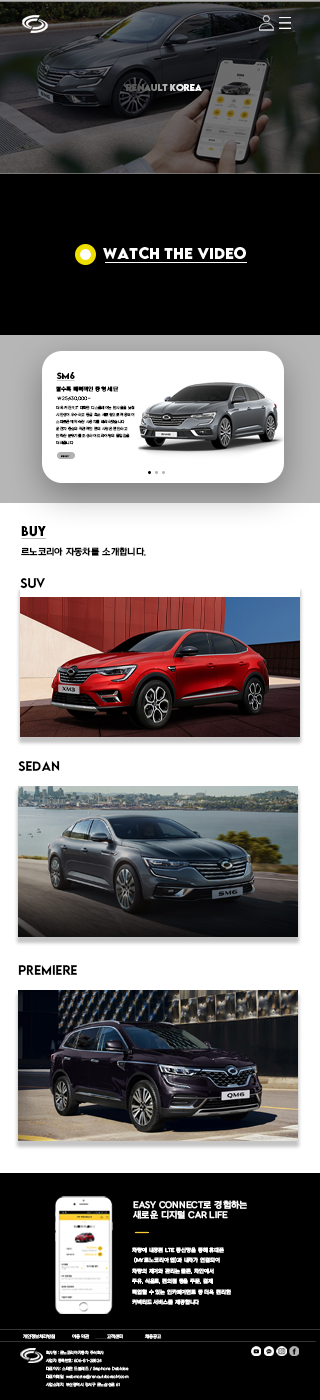
<style>
.page{position:relative;width:320px;height:1400px;background:#000000}
.page>*{position:absolute;margin:0}
.t1{font:8.2px "LEMONMILK-Bold"}
.t2{font:8.1px "LEMONMILK-Bold";color:#000000}
.t3{font:5.4px "NEXONLv1GothicOTFBold";color:#000000}
.t4{font:4.4px "NEXONLv1GothicOTFRegular";color:#000000}
.t5{font:4.4px "Gulim";color:#000000}
.t6{font:3.6px/6.9px "NEXONLv1GothicOTFLight";color:#000000}
.t7{font:2.6px "NEXONLv1GothicOTFLight";color:#000000}
.t8{font:11.9px "LEMONMILK-Bold";color:#000000}
.t9{font:8.9px "NEXONLv1GothicOTFBold";color:#000000}
.t10{font:12px "LEMONMILK-Medium";color:#000000}
.t11{font:8.7px/10.5px "NEXONLv1GothicOTFBold";color:#ffffff}
.t12{font:5.2px/10.5px "NEXONLv1GothicOTFBold";color:#ffffff}
.t13{font:4.3px "NEXONLv1GothicOTFRegular";color:#ffffff}
.t14{font:3.8px/8.2px "NEXONLv1GothicOTFRegular";color:#ffffff}
</style>
<div class="page">
<p class="t1" style="left:126px;top:84px;width:76px;height:7px">Renault Korea</p>
<p class="t2" style="left:56px;top:372px;width:19px;height:7px">SM6</p>
<p class="t3" style="left:56px;top:386px;width:63px;height:6px">탈수록 매력적인 중형 세단</p>
<p class="t4" style="left:57px;top:396px;width:34px;height:5px"><span class="t5">\</span> 25,430,000~</p>
<p class="t6" style="left:55px;top:405px;width:80px;height:40px">더욱 커진 9.3" 대화면 디스플레이는 반사율을 낮춰 <br>시인성이 우수하고 동급 최초 세로형으로 적용되어 <br>스마트폰에 익숙한 사용자를 배려하였습니다<br>운전자 중심의 직관적인 편의 사양은 편안하고 <br>안락한 분위기를 조성하여 드라이빙의 몰입감을 <br>더해줍니다</p>
<p class="t7" style="left:61px;top:455px;width:9px;height:3px">more +</p>
<p class="t8" style="left:21px;top:526px;width:25px;height:11px">BUY</p>
<p class="t9" style="left:21px;top:547px;width:125px;height:10px">르노코리아 자동차를 소개합니다.</p>
<p class="t10" style="left:20px;top:578px;width:25px;height:11px">SUV</p>
<p class="t10" style="left:18px;top:761px;width:42px;height:11px">sedan</p>
<p class="t10" style="left:18px;top:965px;width:59px;height:10px">premiere</p>
<p class="t11" style="left:133px;top:1200px;width:114px;height:19px">EASY CONNECT로 경험하는<br>새로운 디지털 CAR LIFE</p>
<p class="t12" style="left:132px;top:1247px;width:99px;height:58px">차량에 내장된 LTE 통신망을 통해 휴대폰<br> (MY르노코리아 앱)과 내차가 연결되어<br>차량의 제어와 관리는 물론, 차안에서 <br>주유, 식음료, 편의점 등을 주문, 결제, <br>픽업할 수 있는 인카페이먼트 등 더욱 편리한 <br>커넥티드 서비스를 제공합니다</p>
<p class="t13" style="left:23px;top:1334px;width:139px;height:5px">개인정보처리방침            이용약관             고객센터               채용공고</p>
<p class="t14" style="left:45px;top:1350px;width:84px;height:37px">회사명 : 르노코리아자동차 주식회사<br>사업자 등록번호: 606-81-28824<br>대표이사: 스테판 드블레즈 / Srephane Deblaise<br>대표이메일: webmaster@renaultrkoreaM.com<br>사업소재지: 부산광역시 강서구 르노삼성로 61</p>
</div>
